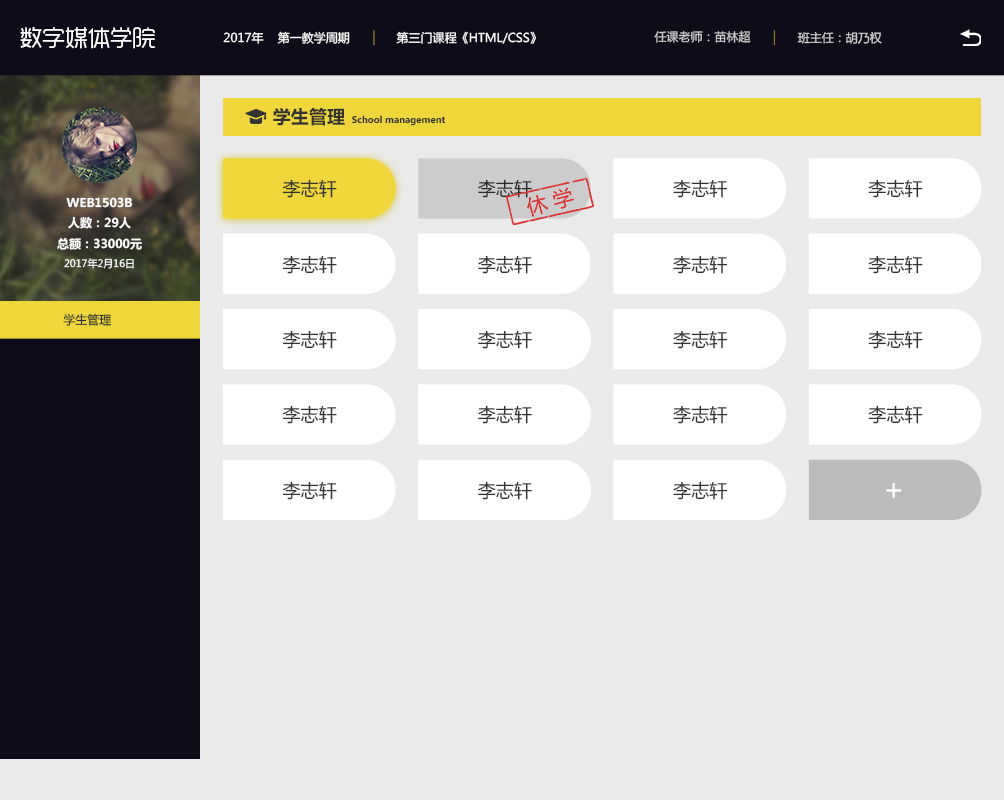
<style>
.page{position:relative;width:1004px;height:800px;background:#eaeaea}
.page>*{position:absolute;margin:0}
.t1{font:22.6px "RTWSYueGoTrial-Regular";color:#ffffff}
.t2{font:12px "MicrosoftYaHei";color:#cdcccd}
.t3{font:12px "MicrosoftYaHei";color:#ffffff}
.t4{font:18.1px "MicrosoftYaHei-Bold";color:#333333}
.t5{font:9px "MicrosoftYaHei-Bold";color:#333333}
.t6{font:18.1px "MicrosoftYaHei";color:#333333}
.t7{font:12px "MicrosoftYaHei-Bold";color:#ffffff}
.t8{font:10px "MicrosoftYaHei";color:#ffffff}
.t9{font:12px "MicrosoftYaHei";color:#333333}
.t10{font:30.1px "MicrosoftYaHei";color:#ffffff}
</style>
<div class="page">
<p class="t1" style="left:20px;top:27px;width:135px;height:22px">数字媒体学院</p>
<p class="t2" style="left:654px;top:30px;width:97px;height:13px">任课老师：苗林超</p>
<p class="t3" style="left:223px;top:31px;width:127px;height:13px">2017年    第一教学周期</p>
<p class="t3" style="left:396px;top:31px;width:140px;height:13px">第三门课程《HTML/CSS》</p>
<p class="t2" style="left:797px;top:31px;width:85px;height:13px">班主任：胡乃权</p>
<p class="t4" style="left:273px;top:108px;width:72px;height:18px">学生管理</p>
<p class="t5" style="left:352px;top:115px;width:94px;height:11px">School management</p>
<p class="t6" style="left:282px;top:179px;width:55px;height:19px">李志轩</p>
<p class="t6" style="left:478px;top:179px;width:54px;height:19px">李志轩</p>
<p class="t6" style="left:673px;top:179px;width:55px;height:19px">李志轩</p>
<p class="t6" style="left:868px;top:179px;width:55px;height:19px">李志轩</p>
<p class="t7" style="left:66px;top:197px;width:67px;height:11px">WEB1503B</p>
<p class="t7" style="left:57px;top:216px;width:85px;height:34px;text-align:center">人数：29人<br>总额：33000元</p>
<p class="t6" style="left:282px;top:255px;width:55px;height:19px">李志轩</p>
<p class="t6" style="left:478px;top:255px;width:54px;height:19px">李志轩</p>
<p class="t6" style="left:673px;top:255px;width:55px;height:19px">李志轩</p>
<p class="t6" style="left:868px;top:255px;width:55px;height:19px">李志轩</p>
<p class="t8" style="left:64px;top:258px;width:70px;height:11px">2017年2月16日</p>
<p class="t9" style="left:63px;top:313px;width:49px;height:13px">学生管理</p>
<p class="t6" style="left:282px;top:330px;width:55px;height:19px">李志轩</p>
<p class="t6" style="left:478px;top:330px;width:54px;height:19px">李志轩</p>
<p class="t6" style="left:673px;top:330px;width:55px;height:19px">李志轩</p>
<p class="t6" style="left:868px;top:330px;width:55px;height:19px">李志轩</p>
<p class="t6" style="left:282px;top:405px;width:55px;height:19px">李志轩</p>
<p class="t6" style="left:478px;top:405px;width:54px;height:19px">李志轩</p>
<p class="t6" style="left:673px;top:405px;width:55px;height:19px">李志轩</p>
<p class="t6" style="left:868px;top:405px;width:55px;height:19px">李志轩</p>
<p class="t6" style="left:282px;top:481px;width:55px;height:19px">李志轩</p>
<p class="t6" style="left:478px;top:481px;width:54px;height:19px">李志轩</p>
<p class="t6" style="left:673px;top:481px;width:55px;height:19px">李志轩</p>
<p class="t10" style="left:886px;top:483px;width:16px;height:15px">+</p>
</div>
